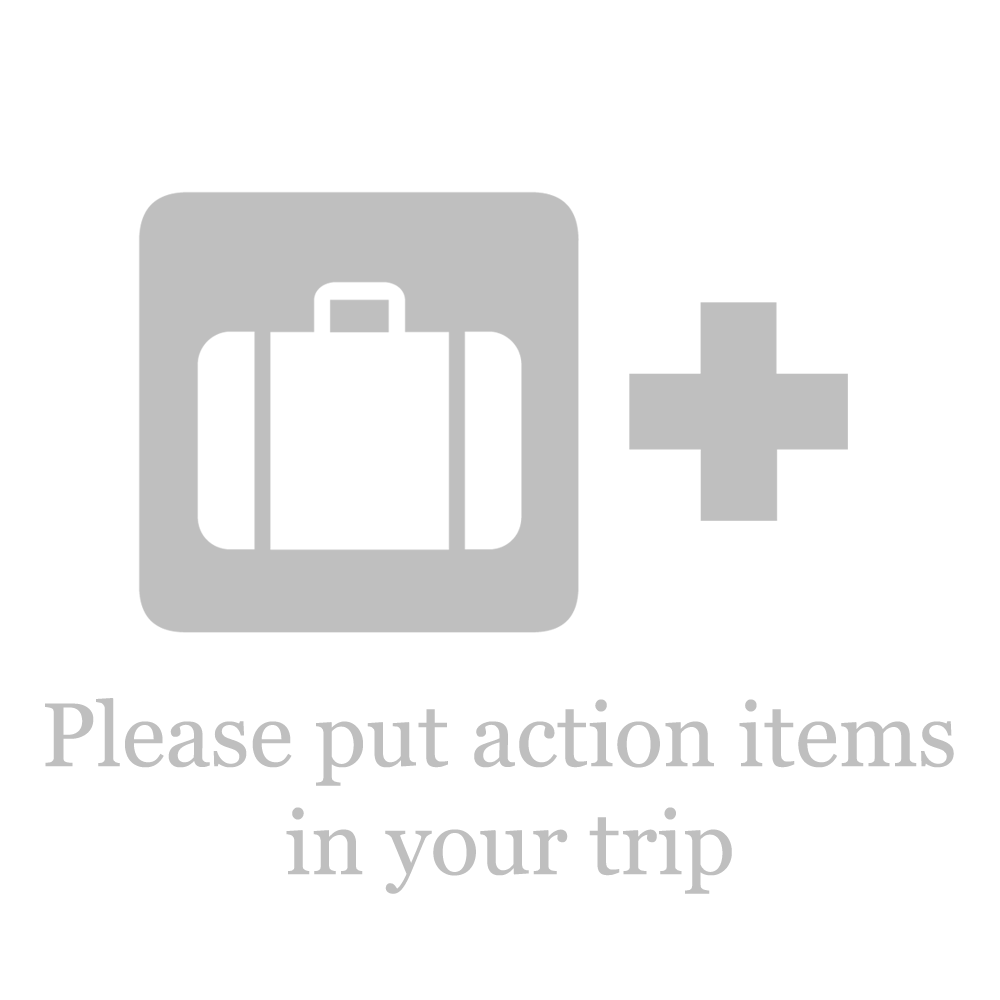
<style>
.page{position:relative;width:1000px;height:1000px;background:#ffffff}
.page>*{position:absolute;margin:0}
.t1{font:90px "Vani";color:#bfbfbf}
</style>
<div class="page">
<p class="t1" style="left:45px;top:698px;width:909px;height:196px;text-align:center">Please put action items <br>in your trip</p>
</div>
